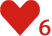
<style>
.page{position:relative;width:52px;height:36px;background:#d22018}
.page>*{position:absolute;margin:0}
.t1{font:23.4px "MyriadPro-Regular";letter-spacing:-0.1em;color:#d22018;font-weight:bold}
</style>
<div class="page">
<p class="t1" style="left:39px;top:19px;width:12px;height:17px">6</p>
</div>
